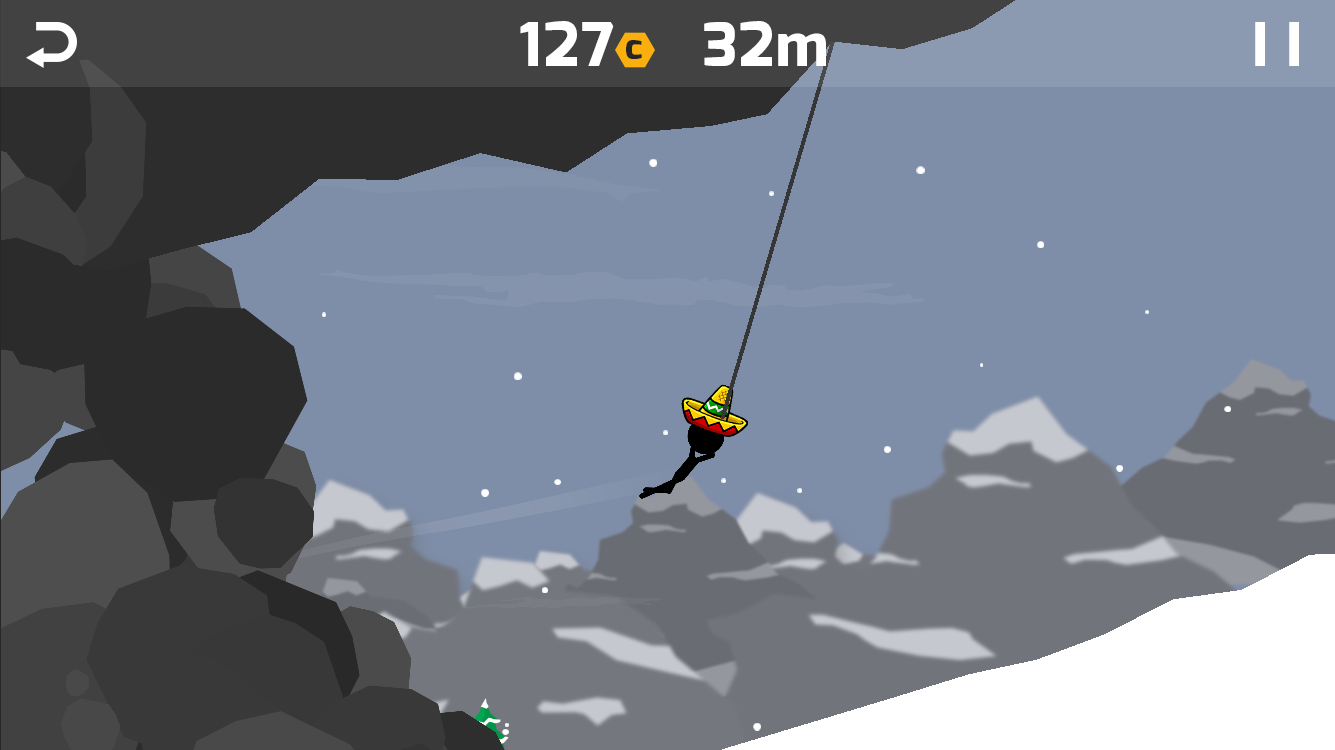
<style>
.page{position:relative;width:1335px;height:750px;background:#7f8ea8}
.page>*{position:absolute;margin:0}
.t1{font:60px "Exo-ExtraBold";letter-spacing:0.03em;color:#ffffff}
.t2{font:36px "Exo-ExtraBold";letter-spacing:0.03em;color:#252525}
</style>
<div class="page">
<p class="t1" style="left:520px;top:21px;width:94px;height:45px">127</p>
<p class="t1" style="left:704px;top:21px;width:122px;height:45px">32m</p>
<p class="t1" style="left:1255px;top:22px;width:44px;height:44px">I I</p>
<p class="t2" style="left:626px;top:40px;width:16px;height:19px">c</p>
</div>
